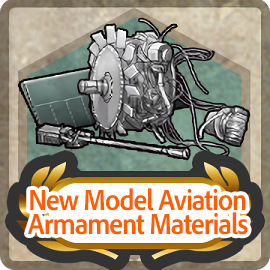
<style>
.page{position:relative;width:270px;height:270px}
.page>*{position:absolute;margin:0}
.t1{font:30px/24px "AdobeClean-Bold";letter-spacing:-0.04em;color:#ff5d00;scale:0.9 1}
</style>
<div class="page">
<p class="t1" style="left:28px;top:188px;width:220px;height:47px;text-align:center">New Model Aviation<br>Armament Materials</p>
</div>
